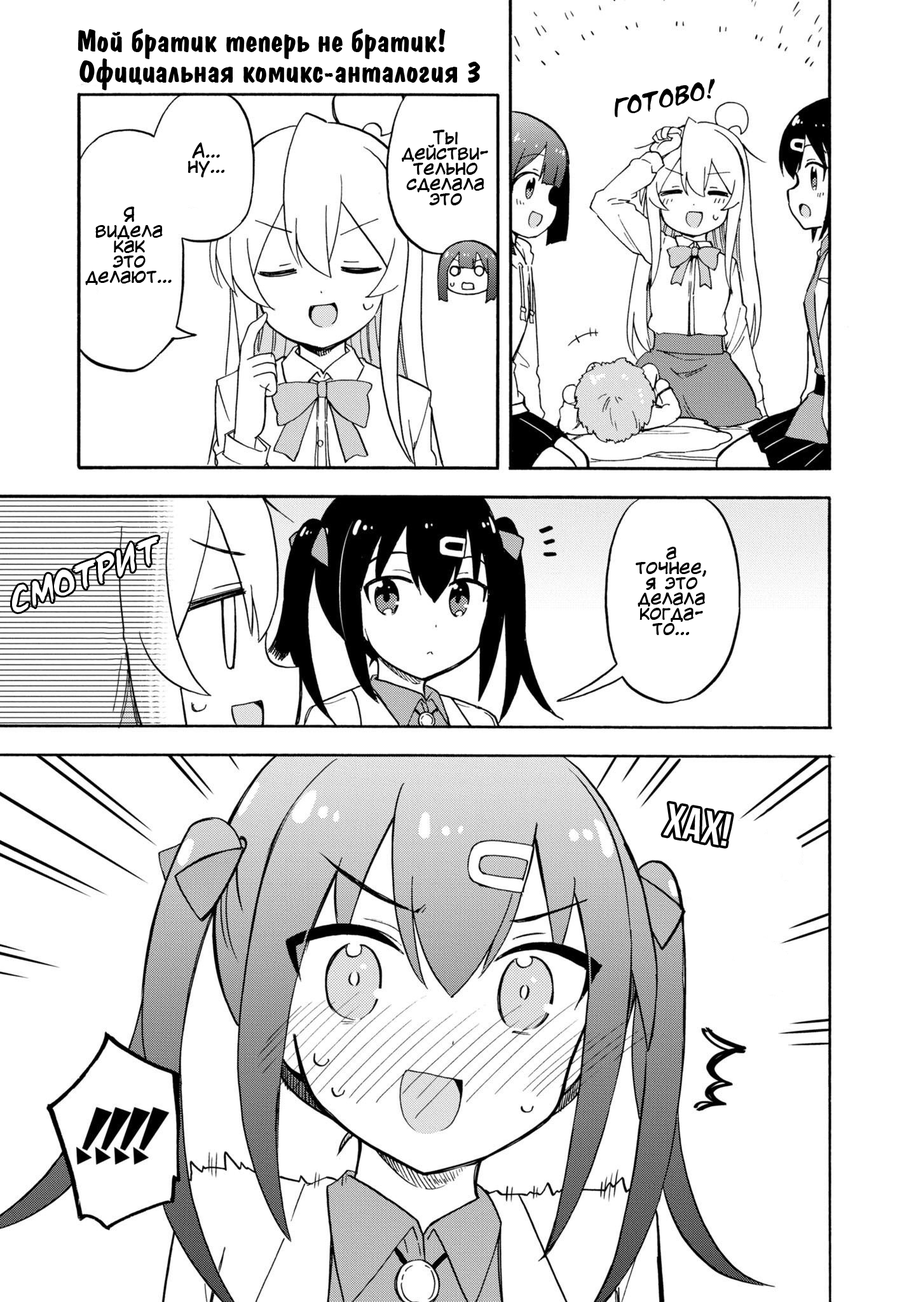
<style>
.page{position:relative;width:916px;height:1302px;background:#ffffff}
.page>*{position:absolute;margin:0}
.t1{font:30.5px/30.5px "ADomInoBold";color:#000000}
.t2{font:22.9px "d_CCTimSaleBrush-Italic";color:#000000}
.t3{font:19.1px/15.3px "KuraiVoice2";color:#000000}
.t4{font:45.8px "Adderley-Bold";color:#ffffff}
</style>
<div class="page">
<p class="t1" style="left:78px;top:29px;width:403px;height:61px;text-align:center">Мой братик теперь не братик!<br>     Официальная комикс-анталогия 3</p>
<p class="t2" style="left:615px;top:79px;width:100px;height:39px;rotate:-11deg">Готово!</p>
<p class="t3" style="left:402px;top:130px;width:86px;height:75px;text-align:center">Ты<br>действи-<br>тельно<br>сделала<br>это</p>
<p class="t3" style="left:188px;top:142px;width:37px;height:35px;text-align:center">А…<br>ну…</p>
<p class="t3" style="left:85px;top:207px;width:87px;height:78px;text-align:center">Я<br>видела<br>как<br>это<br>делают…</p>
<p class="t3" style="left:636px;top:547px;width:70px;height:88px;text-align:center">а<br>точнее,<br>я это<br>делала<br>когда-<br>то…</p>
<p class="t4" style="left:663px;top:803px;width:69px;height:43px;rotate:11deg">ХАХ!</p>
</div>
